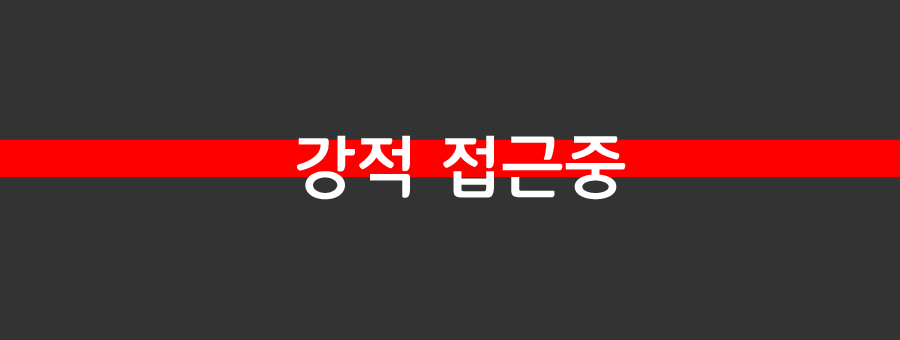
<style>
.page{position:relative;width:900px;height:340px;background:#333333}
.page>*{position:absolute;margin:0}
.t1{font:70px "12LotteMartDreamBold";color:#ffffff}
</style>
<div class="page">
<p class="t1" style="left:297px;top:135px;width:329px;height:65px">강적 접근중</p>
</div>
